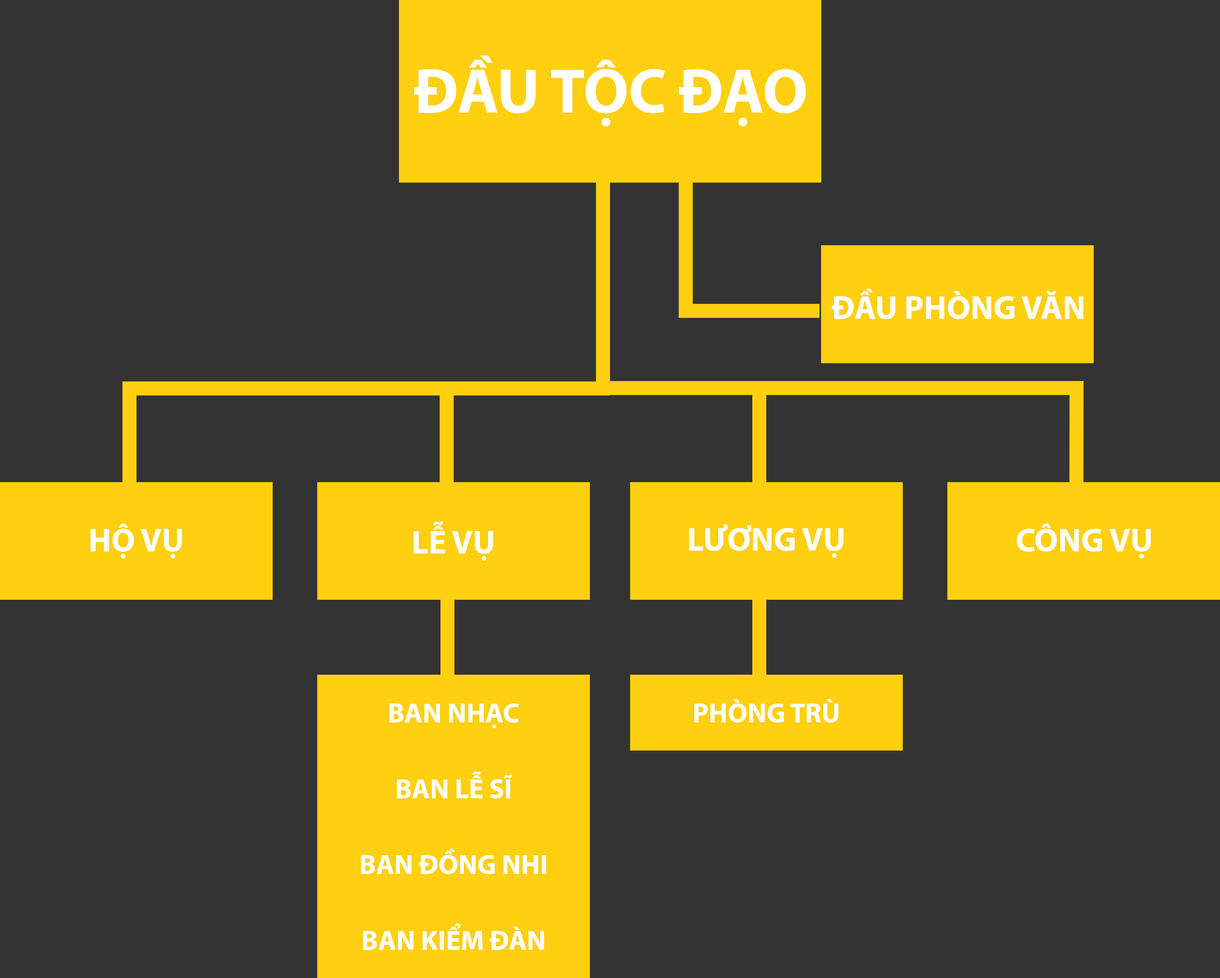
<style>
.page{position:relative;width:1220px;height:978px;background:#333333}
.page>*{position:absolute;margin:0}
.t1{font:63.3px "MyriadPro-Bold";color:#ffffff}
.t2{font:33.2px "MyriadPro-Bold";color:#ffffff}
.t3{font:27.7px "MyriadPro-Bold";color:#ffffff}
</style>
<div class="page">
<p class="t1" style="left:414px;top:55px;width:392px;height:71px">ĐẦU TỘC ĐẠO</p>
<p class="t2" style="left:831px;top:289px;width:252px;height:30px">ĐẦU PHÒNG VĂN</p>
<p class="t2" style="left:414px;top:521px;width:79px;height:39px">LỄ VỤ</p>
<p class="t2" style="left:91px;top:523px;width:91px;height:35px">HỘ VỤ</p>
<p class="t2" style="left:689px;top:524px;width:154px;height:33px">LƯƠNG VỤ</p>
<p class="t2" style="left:1017px;top:523px;width:134px;height:35px">CÔNG VỤ</p>
<p class="t3" style="left:694px;top:699px;width:144px;height:23px">PHÒNG TRÙ</p>
<p class="t3" style="left:389px;top:703px;width:130px;height:25px">BAN NHẠC</p>
<p class="t3" style="left:397px;top:771px;width:115px;height:27px">BAN LỄ SĨ</p>
<p class="t3" style="left:361px;top:848px;width:185px;height:26px">BAN ĐỒNG NHI</p>
<p class="t3" style="left:363px;top:923px;width:181px;height:27px">BAN KIỂM ĐÀN</p>
</div>
